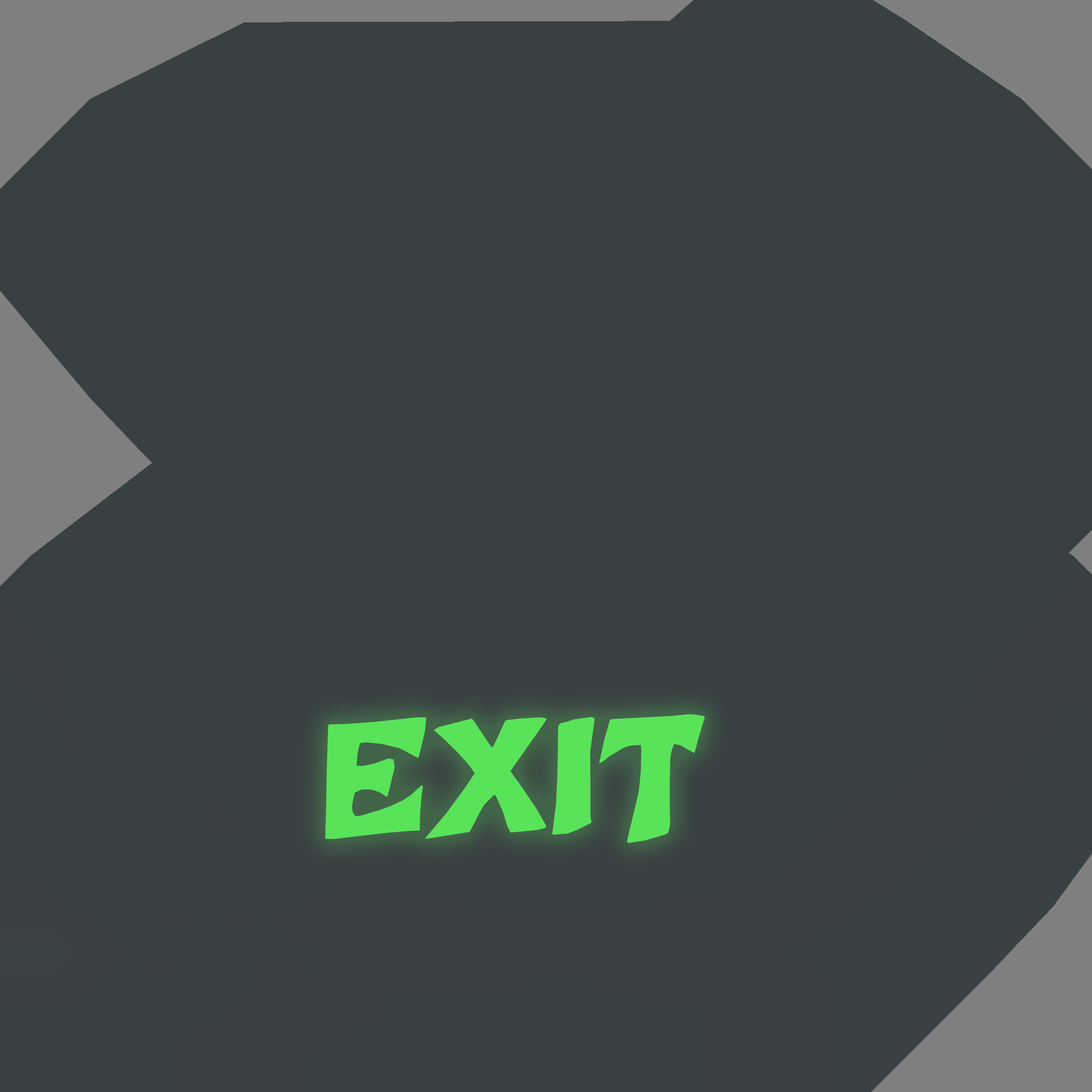
<style>
.page{position:relative;width:1092px;height:1092px;background:#394042}
.page>*{position:absolute;margin:0}
.t1{font:160px "Tarzan";color:#59e359}
</style>
<div class="page">
<p class="t1" style="left:325px;top:714px;width:380px;height:129px">EXIT</p>
</div>
